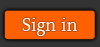
<style>
.page{position:relative;width:100px;height:47px;background:#ff6000}
.page>*{position:absolute;margin:0}
.t1{font:18px "Contra";color:#ffffff}
</style>
<div class="page">
<p class="t1" style="left:22px;top:18px;width:56px;height:18px">Sign in</p>
</div>
